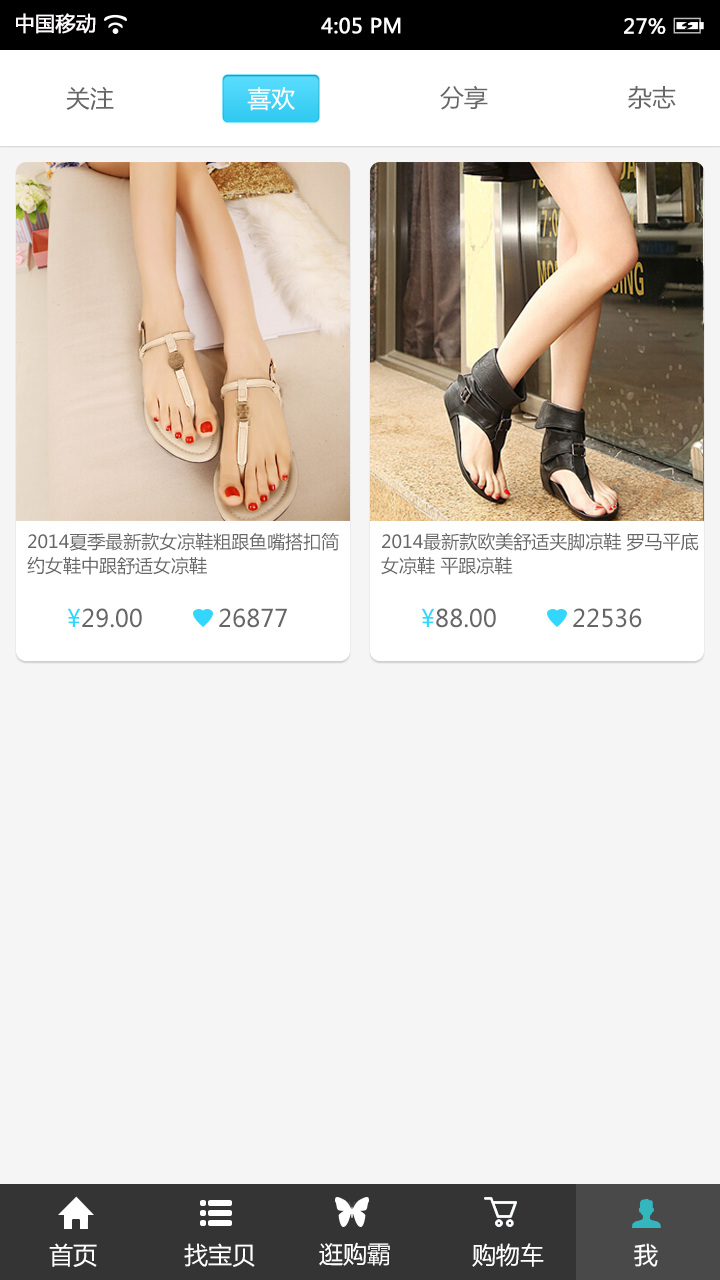
<style>
.page{position:relative;width:720px;height:1280px;background:#f5f5f5}
.page>*{position:absolute;margin:0}
.t1{font:20px "MicrosoftYaHei";color:#fffcfc;font-weight:bold}
.t2{font:20px "MicrosoftYaHei";color:#ffffff;font-weight:bold}
.t3{font:20px "MicrosoftYaHei";color:#fffefe;font-weight:bold}
.t4{font:24px "MicrosoftYaHei";color:#666666}
.t5{font:24px "MicrosoftYaHei";color:#ffffff}
.t6{font:18px/24px "MicrosoftYaHei";color:#666666}
.t7{font:24px "MicrosoftYaHei";color:#33d6ff}
</style>
<div class="page">
<p class="t1" style="left:16px;top:13px;width:80px;height:21px">中国移动</p>
<p class="t2" style="left:321px;top:17px;width:80px;height:17px">4:05 PM</p>
<p class="t3" style="left:624px;top:18px;width:42px;height:16px">27%</p>
<p class="t4" style="left:66px;top:86px;width:48px;height:24px">关注</p>
<p class="t5" style="left:247px;top:87px;width:48px;height:24px">喜欢</p>
<p class="t4" style="left:440px;top:85px;width:48px;height:25px">分享</p>
<p class="t4" style="left:628px;top:86px;width:48px;height:23px">杂志</p>
<p class="t6" style="left:27px;top:533px;width:312px;height:42px">2014夏季最新款女凉鞋粗跟鱼嘴搭扣简<br>约女鞋中跟舒适女凉鞋</p>
<p class="t6" style="left:381px;top:532px;width:318px;height:43px">2014最新款欧美舒适夹脚凉鞋 罗马平底<br>女凉鞋 平跟凉鞋</p>
<p class="t4" style="left:67px;top:608px;width:75px;height:20px"><span class="t7">¥</span>29.00</p>
<p class="t4" style="left:219px;top:608px;width:68px;height:20px">26877</p>
<p class="t4" style="left:421px;top:608px;width:75px;height:20px"><span class="t7">¥</span>88.00</p>
<p class="t4" style="left:573px;top:608px;width:69px;height:20px">22536</p>
<p class="t5" style="left:49px;top:1243px;width:48px;height:24px">首页</p>
<p class="t5" style="left:184px;top:1243px;width:71px;height:24px">找宝贝</p>
<p class="t5" style="left:319px;top:1242px;width:71px;height:24px">逛购霸</p>
<p class="t5" style="left:472px;top:1243px;width:72px;height:24px">购物车</p>
<p class="t5" style="left:634px;top:1243px;width:24px;height:24px">我</p>
</div>
